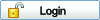
<style>
.page{position:relative;width:100px;height:20px;background:#ffffff}
.page>*{position:absolute;margin:0}
.t1{font:11.1px "ArialMT";color:#060808}
</style>
<div class="page">
<p class="t1" style="left:40px;top:6px;width:26px;height:12px">Login</p>
</div>
